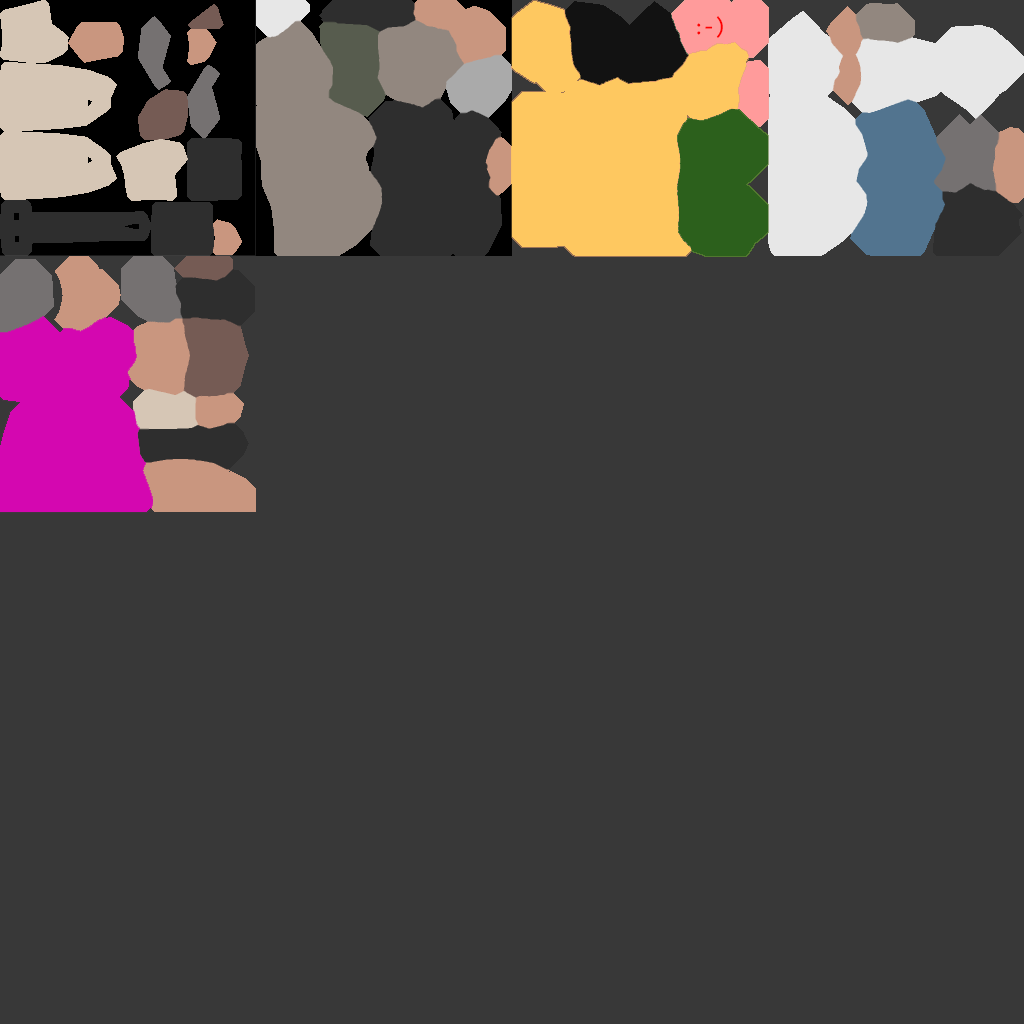
<style>
.page{position:relative;width:1024px;height:1024px;background:#383838}
.page>*{position:absolute;margin:0}
.t1{font:25.8px "Karla-Regular";letter-spacing:0.12em;color:#ff0000;scale:0.93 1}
</style>
<div class="page">
<p class="t1" style="left:697px;top:16px;width:26px;height:22px">:-)</p>
</div>
